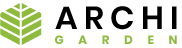
<style>
.page{position:relative;width:182px;height:48px;background:#ffffff}
.page>*{position:absolute;margin:0}
.t1{font:32px "Poppins-SemiBold";letter-spacing:0.2em;color:#000000}
.t2{font:12px "Poppins-Bold";letter-spacing:1.22em;color:#8ebb3e}
</style>
<div class="page">
<p class="t1" style="left:55px;top:6px;width:122px;height:24px">ARCHI</p>
<p class="t2" style="left:55px;top:35px;width:122px;height:9px">GARDEN</p>
</div>
